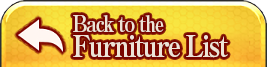
<style>
.page{position:relative;width:267px;height:67px}
.page>*{position:absolute;margin:0}
.t1{font:30px/18px "RyuminPro-ExBold";letter-spacing:-0.08em;color:#ede4d7;scale:0.9 1}
.t2{font:22px/18px "RyuminPro-ExBold";letter-spacing:-0.08em;color:#ede4d7;scale:0.9 1}
</style>
<div class="page">
<p class="t1" style="left:73px;top:15px;width:155px;height:43px"><span class="t2">Back to the<br></span>Furniture List</p>
</div>
